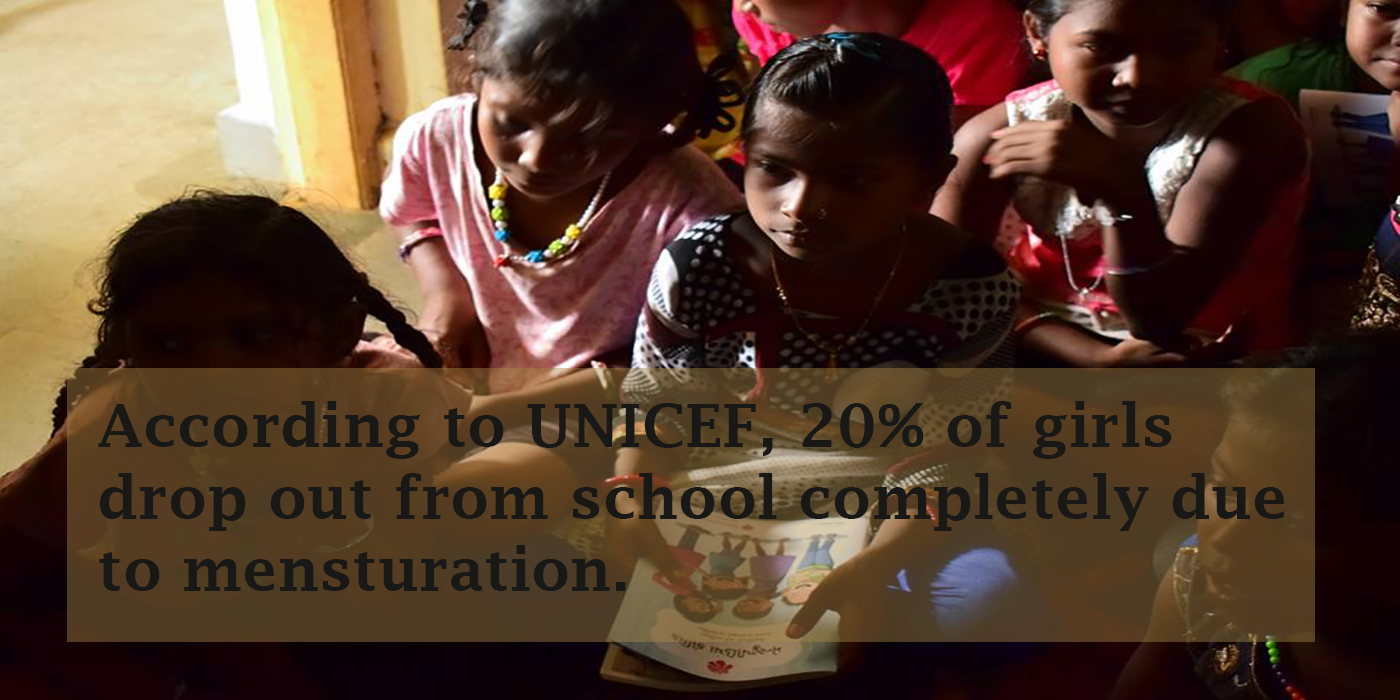
<style>
.page{position:relative;width:1400px;height:700px}
.page>*{position:absolute;margin:0}
.t1{font:60px "LucidaFax-Demi";color:#181817}
</style>
<div class="page">
<p class="t1" style="left:98px;top:401px;width:1186px;height:190px">According to UNICEF, 20% of girls drop out from school completely due to mensturation.</p>
</div>
